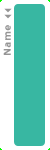
<style>
.page{position:relative;width:50px;height:150px;background:#38b7a2}
.page>*{position:absolute;margin:0}
.t1{font:12px "BlueHighwayBold";color:#959595}
</style>
<div class="page">
<p class="t1" style="left:3px;top:25px;width:8px;height:30px;rotate:-90deg">Name</p>
</div>
